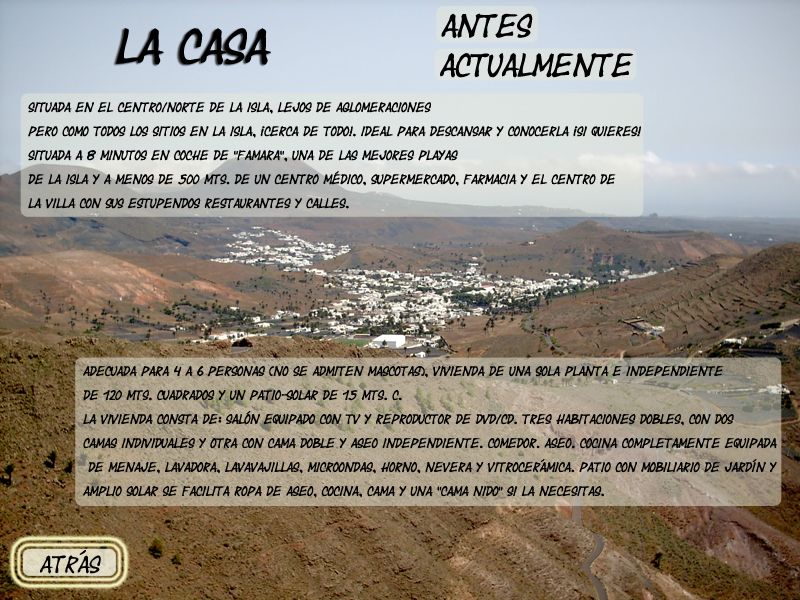
<style>
.page{position:relative;width:800px;height:600px}
.page>*{position:absolute;margin:0}
.t1{font:24px "Yearsupplyoffairycakes";color:#000000}
.t2{font:36px "Yearsupplyoffairycakes";color:#000000}
.t3{font:10px "Yearsupplyoffairycakes";color:#000000}
.t4{font:18px "Yearsupplyoffairycakes";color:#000000}
</style>
<div class="page">
<p class="t1" style="left:441px;top:13px;width:92px;height:25px">Antes</p>
<p class="t2" style="left:116px;top:28px;width:155px;height:37px">la casa</p>
<p class="t1" style="left:440px;top:53px;width:194px;height:25px">actualmente</p>
<p class="t3" style="left:28px;top:102px;width:613px;height:107px">Situada en el centro/norte de la Isla, lejos de aglomeraciones <br><br>pero como todos los sitios en la isla, ¡Cerca de todo!. Ideal para descansar y conocerla ¡Si quieres!<br><br>Situada a 8 minutos en coche de “Famara”, una de las mejores playas <br><br>de la Isla y a menos de 500 mts. de un centro médico, supermercado, farmacia y el centro de<br><br>la Villa con sus estupendos restaurantes y calles.</p>
<p class="t3" style="left:83px;top:366px;width:695px;height:132px">Adecuada para 4 a 6 personas (No se admiten mascotas), vivienda de una sola planta e independiente<br><br>de 120 mts. cuadrados y un patio-solar de 15 mts. c. <br><br>La vivienda consta de: Salón equipado con TV y reproductor de DVD/CD. Tres habitaciones dobles, con dos<br><br>camas individuales y otra con cama doble y aseo independiente. Comedor. Aseo. Cocina completamente equipada<br><br> de menaje, lavadora, lavavajillas, microondas, horno, nevera y vitrocerámica. Patio con mobiliario de jardín y <br><br>amplio solar Se facilita ropa de aseo, cocina, cama y una “cama nido” si la necesitas.</p>
<p class="t4" style="left:40px;top:550px;width:61px;height:24px">atrás</p>
</div>
